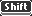
<style>
.page{position:relative;width:32px;height:16px;background:#333333}
.page>*{position:absolute;margin:0}
.t1{font:8px "NokiaCellphoneFC-Small";letter-spacing:0.025em;color:#ffffff}
</style>
<div class="page">
<p class="t1" style="left:5px;top:3px;width:22px;height:7px">Shift</p>
</div>
